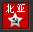
<style>
.page{position:relative;width:33px;height:32px;background:#c50000}
.page>*{position:absolute;margin:0}
.t1{font:10.4px "SimSun";color:#ffffff}
</style>
<div class="page">
<p class="t1" style="left:6px;top:4px;width:19px;height:9px">北亚</p>
</div>
